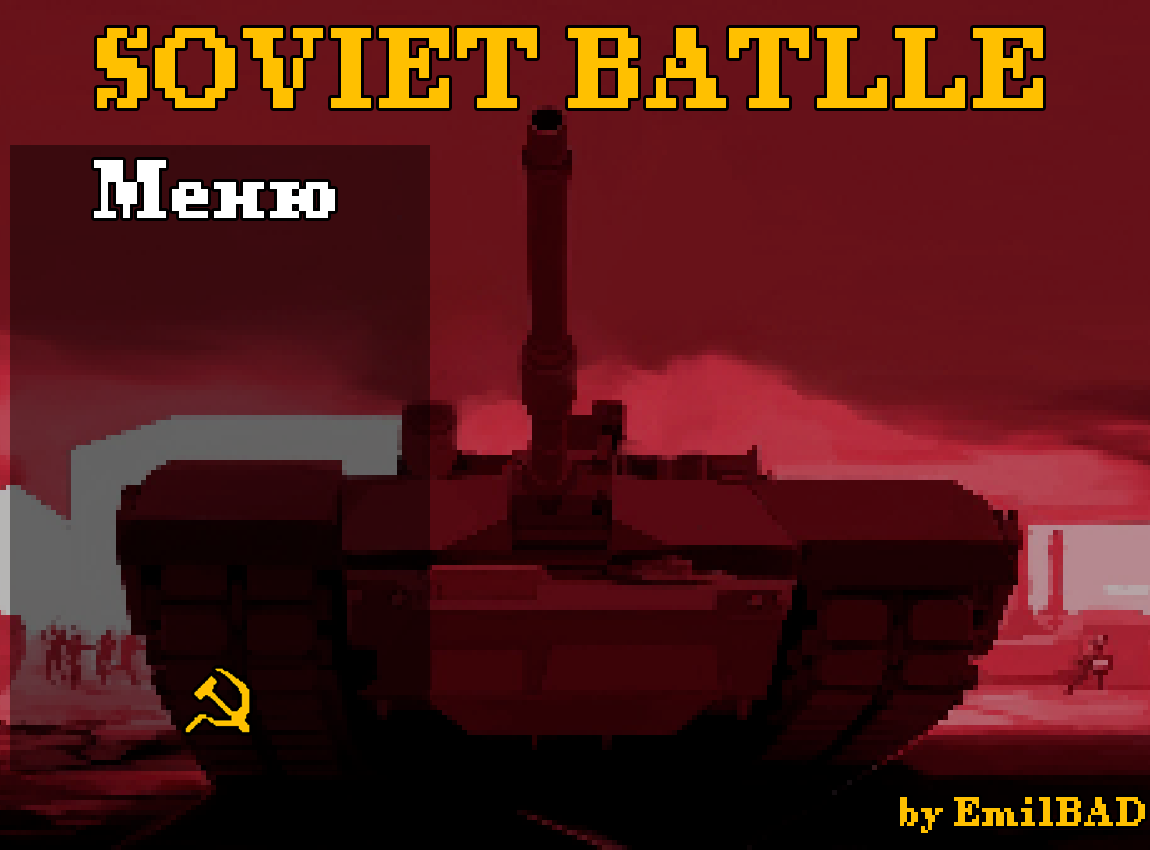
<style>
.page{position:relative;width:1150px;height:850px}
.page>*{position:absolute;margin:0}
.t1{font:100px "PixelTimesBold";letter-spacing:-0.02em;color:#ffc000}
.t2{font:72px "PixelTimesBold";letter-spacing:-0.02em;color:#ffffff}
.t3{font:36px "PixelTimesBold";letter-spacing:-0.02em;color:#ffc000}
</style>
<div class="page">
<p class="t1" style="left:97px;top:28px;width:946px;height:80px">SOVIET BATLLE</p>
<p class="t2" style="left:94px;top:160px;width:241px;height:58px">Меню</p>
<p class="t3" style="left:900px;top:797px;width:245px;height:36px">by EmilBAD</p>
</div>
